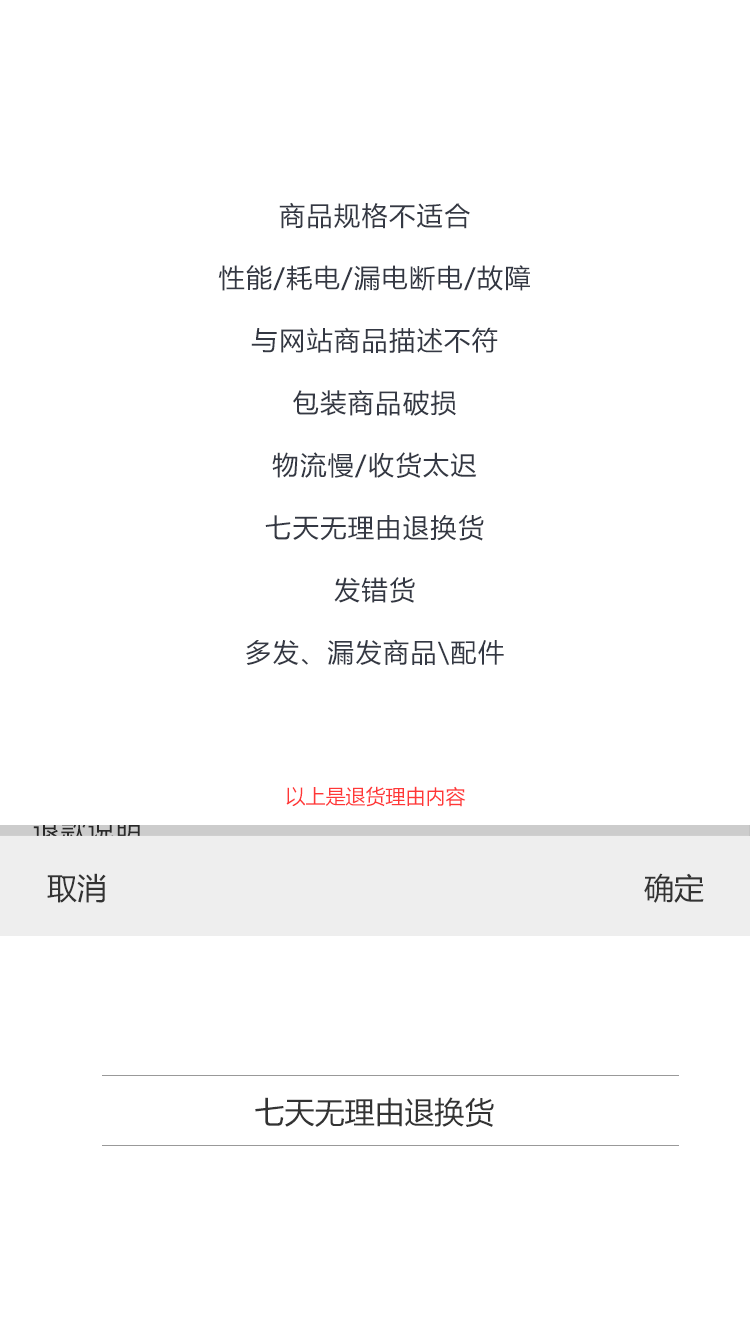
<style>
.page{position:relative;width:750px;height:1334px;background:#ffffff}
.page>*{position:absolute;margin:0}
.t1{font:26px "MicrosoftYaHei";letter-spacing:0.06em;color:#343843}
.t2{font:20px "MicrosoftYaHei";color:#ff3737}
.t3{font:26px "MicrosoftYaHei";letter-spacing:0.06em}
.t4{font:30px "MicrosoftYaHei";color:#333333}
</style>
<div class="page">
<p class="t1" style="left:218px;top:202px;width:312px;height:463px;text-align:center">商品规格不适合<br><br>性能/耗电/漏电断电/故障<br><br>与网站商品描述不符<br><br>包装商品破损<br><br>物流慢/收货太迟<br><br>七天无理由退换货<br><br>发错货<br><br>多发、漏发商品\配件</p>
<p class="t2" style="left:286px;top:786px;width:180px;height:21px">以上是退货理由内容</p>
<p class="t3" style="left:33px;top:817px;width:107px;height:26px">退款说明</p>
<p class="t4" style="left:47px;top:873px;width:59px;height:30px">取消</p>
<p class="t4" style="left:644px;top:873px;width:60px;height:30px">确定</p>
<p class="t4" style="left:255px;top:1097px;width:239px;height:30px">七天无理由退换货</p>
</div>
